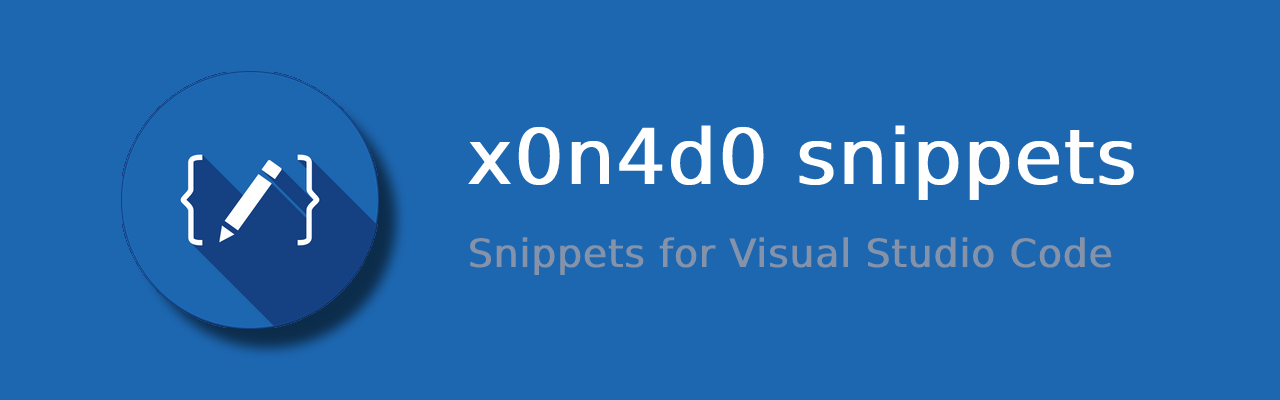
<style>
.page{position:relative;width:1280px;height:400px;background:#1d67b1}
.page>*{position:absolute;margin:0}
.t1{font:77px "DejaVuSans";color:#ffffff;font-weight:bold}
.t2{font:39px "DejaVuSans";color:#8493aa;font-weight:bold}
</style>
<div class="page">
<p class="t1" style="left:468px;top:125px;width:666px;height:76px">x0n4d0 snippets</p>
<p class="t2" style="left:470px;top:237px;width:642px;height:39px">Snippets for Visual Studio Code</p>
</div>
